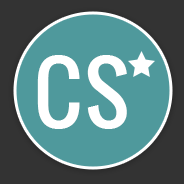
<style>
.page{position:relative;width:184px;height:184px;background:#4f999c}
.page>*{position:absolute;margin:0}
.t1{font:83.1px "Oswald";color:#ffffff}
</style>
<div class="page">
<p class="t1" style="left:37px;top:55px;width:90px;height:74px">CS</p>
</div>
